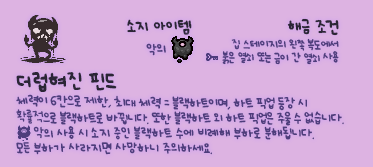
<style>
.page{position:relative;width:373px;height:167px;background:#ddb3e2}
.page>*{position:absolute;margin:0}
.t1{font:12px "UhBeeSe_hyunBold";color:#2b2636}
.t2{font:12px "UhBeeSe_hyunBold";letter-spacing:-0.1em;color:#2b2636}
.t3{font:12px "UhBeeSe_hyunBold";letter-spacing:-0.15em;color:#2b2636}
.t4{font:9px/13px "UhBeeSe_hyunBold";letter-spacing:-0.05em;color:#4e3d7c}
.t5{font:10px "UhBeeSe_hyunBold";color:#4e3d7c}
.t6{font:10px/15px "UhBeeSe_hyunBold";letter-spacing:-0.025em;color:#4e3d7c}
.t7{font:16px/23px "UhBeeSe_hyunBold";color:#2b2636}
.t8{font:10px/15px "UhBeeSe_hyunBold";letter-spacing:-0.075em;color:#4e3d7c}
.t9{font:10px/15px "UhBeeSe_hyun";letter-spacing:-0.075em;color:#4e3d7c}
</style>
<div class="page">
<p class="t1" style="left:127px;top:19px;width:65px;height:16px"><span class="t2">소</span>지 아이템</p>
<p class="t1" style="left:287px;top:18px;width:52px;height:18px">해금 <span class="t3">조</span>건</p>
<p class="t4" style="left:222px;top:38px;width:117px;height:27px;text-align:right">집 스테이지의 왼쪽 복도에서<br>붉은 열쇠 또는 금이 간 열쇠 사용</p>
<p class="t5" style="left:146px;top:43px;width:20px;height:13px">악의</p>
<p class="t6" style="left:16px;top:72px;width:328px;height:83px"><span class="t7">더럽혀진 핀드<br></span><span class="t8">체력이 6칸으로 제한, 최대 체력 = 블랙하트이며, 하트 픽업 등장 시<br></span><span class="t9">확률적</span><span class="t8">으로 블랙하트로 바뀝니다. 또한 블랙하트 외 하트 픽업은 주울 수 </span>없습니다.<br>     악의 사용 시 소지 중인 블랙하트 수에 비례해 부하로 분해됩니다. <br>모든 부하가 사라지면 사망하니 주의하세요.</p>
</div>
